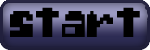
<style>
.page{position:relative;width:150px;height:50px;background:#000000}
.page>*{position:absolute;margin:0}
.t1{font:51.8px "Gabs-Pixel";color:#000000}
</style>
<div class="page">
<p class="t1" style="left:10px;top:7px;width:130px;height:30px">Start</p>
</div>
